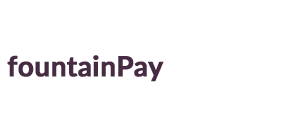
<style>
.page{position:relative;width:300px;height:127px;background:#ffffff}
.page>*{position:absolute;margin:0}
.t1{font:27.7px "Lato-Bold";color:#462b43;font-weight:bold}
</style>
<div class="page">
<p class="t1" style="left:7px;top:55px;width:157px;height:27px">fountainPay</p>
</div>
